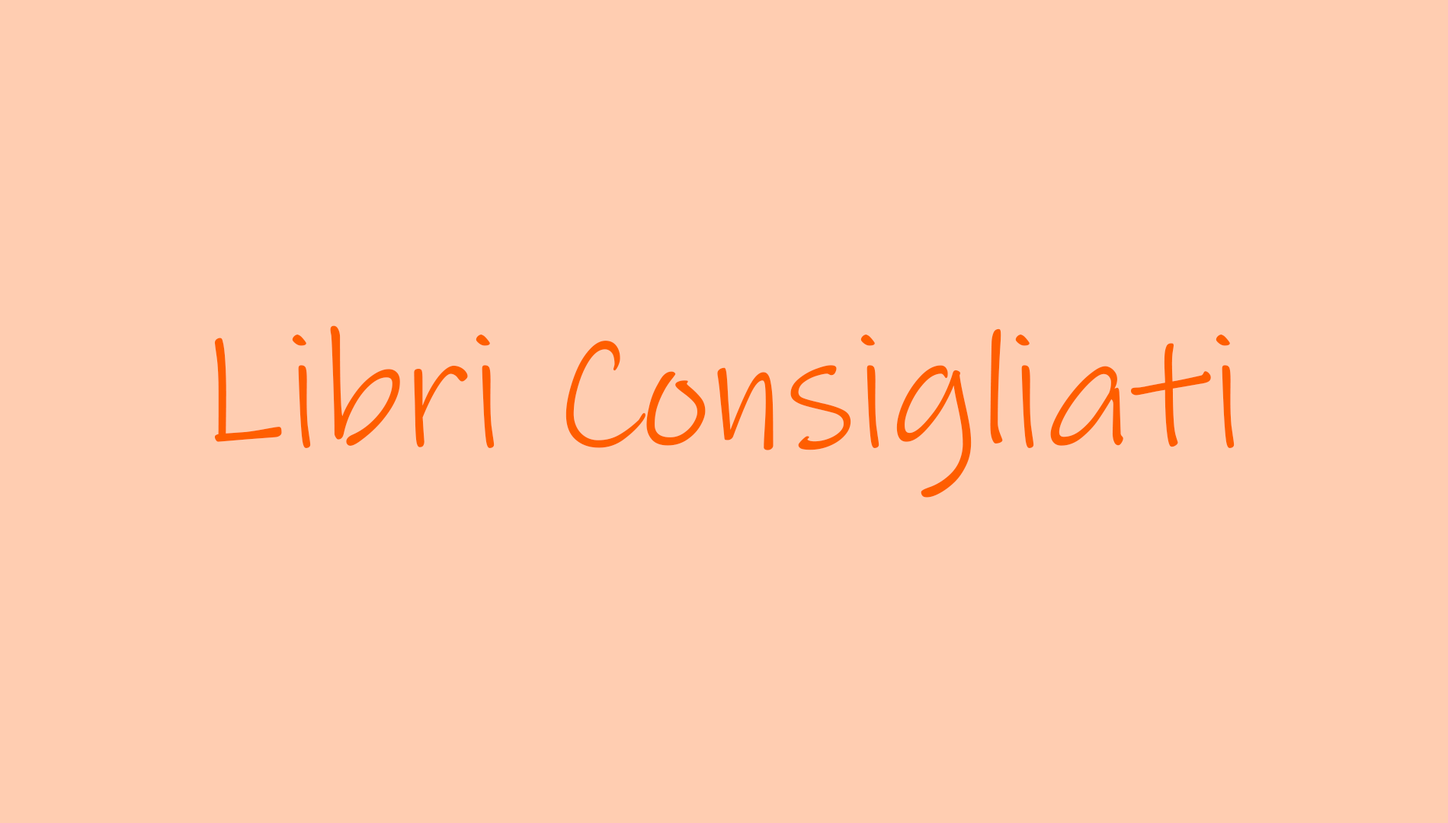
<style>
.page{position:relative;width:1448px;height:823px;background:#ffcdb1}
.page>*{position:absolute;margin:0}
.t1{font:161.4px "InkFree";color:#ff5e00}
</style>
<div class="page">
<p class="t1" style="left:214px;top:326px;width:1021px;height:172px">Libri Consigliati</p>
</div>
